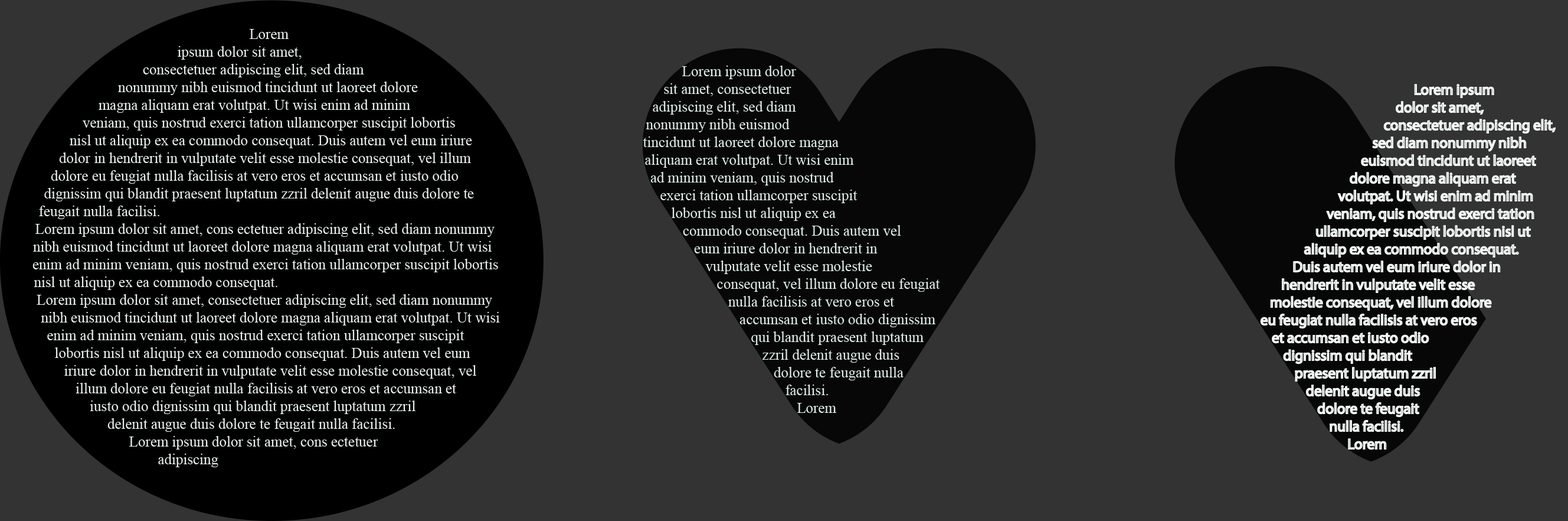
<style>
.page{position:relative;width:1568px;height:521px;background:#333333}
.page>*{position:absolute;margin:0}
.t1{font:14.8px "MyriadPro-Regular";color:#e8efee}
.t2{font:14.8px "MyriadPro-Regular";color:#ddede9}
</style>
<div class="page">
<p class="t1" style="left:32px;top:29px;width:468px;height:438px">Lorem ipsum dolor sit amet, consectetuer adipiscing elit, sed diam nonummy nibh euismod tincidunt ut laoreet dolore magna aliquam erat volutpat. Ut wisi enim ad minim veniam, quis nostrud exerci tation ullamcorper suscipit lobortis nisl ut aliquip ex ea commodo consequat. Duis autem vel eum iriure dolor in hendrerit in vulputate velit esse molestie consequat, vel illum dolore eu feugiat nulla facilisis at vero eros et accumsan et iusto odio dignissim qui blandit praesent luptatum zzril delenit augue duis dolore te feugait nulla facilisi.<br>Lorem ipsum dolor sit amet, cons ectetuer adipiscing elit, sed diam nonummy nibh euismod tincidunt ut laoreet dolore magna aliquam erat volutpat. Ut wisi enim ad minim veniam, quis nostrud exerci tation ullamcorper suscipit lobortis nisl ut aliquip ex ea commodo consequat.<br>Lorem ipsum dolor sit amet, consectetuer adipiscing elit, sed diam nonummy nibh euismod tincidunt ut laoreet dolore magna aliquam erat volutpat. Ut wisi enim ad minim veniam, quis nostrud exerci tation ullamcorper suscipit lobortis nisl ut aliquip ex ea commodo consequat. Duis autem vel eum iriure dolor in hendrerit in vulputate velit esse molestie consequat, vel illum dolore eu feugiat nulla facilisis at vero eros et accumsan et iusto odio dignissim qui blandit praesent luptatum zzril delenit augue duis dolore te feugait nulla facilisi.<br>Lorem ipsum dolor sit amet, cons ectetuer adipiscing</p>
<p class="t2" style="left:643px;top:66px;width:297px;height:347px">Lorem ipsum dolor sit amet, consectetuer adipiscing elit, sed diam nonummy nibh euismod tincidunt ut laoreet dolore magna aliquam erat volutpat. Ut wisi enim ad minim veniam, quis nostrud exerci tation ullamcorper suscipit lobortis nisl ut aliquip ex ea commodo consequat. Duis autem vel eum iriure dolor in hendrerit in vulputate velit esse molestie consequat, vel illum dolore eu feugiat nulla facilisis at vero eros et accumsan et iusto odio dignissim qui blandit praesent luptatum zzril delenit augue duis dolore te feugait nulla facilisi.<br>Lorem</p>
</div>
